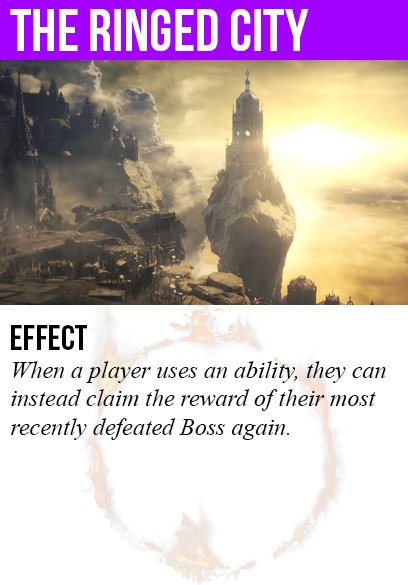
<style>
.page{position:relative;width:408px;height:585px;background:#ffffff}
.page>*{position:absolute;margin:0}
.t1{font:60px "BebasNeue";color:#ffffff}
.t2{font:36px "BebasNeue";color:#000000}
.t3{font:24px "TimesNewRomanPS-ItalicMT";color:#000000}
</style>
<div class="page">
<p class="t1" style="left:10px;top:9px;width:299px;height:42px">the ringed city</p>
<p class="t2" style="left:11px;top:325px;width:76px;height:25px">Effect</p>
<p class="t3" style="left:11px;top:361px;width:375px;height:79px">When a player uses an ability, they can<br>instead claim the reward of their most<br>recently defeated Boss again.</p>
</div>
